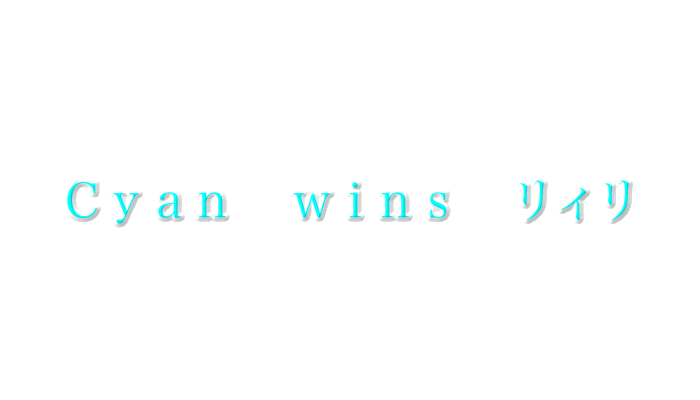
<style>
.page{position:relative;width:700px;height:400px;background:#ffffff}
.page>*{position:absolute;margin:0}
.t1{font:48px "HiraMinProN-W3";letter-spacing:0.12em;color:#00fcfc}
</style>
<div class="page">
<p class="t1" style="left:67px;top:180px;width:562px;height:44px">Ｃｙａｎ　ｗｉｎｓ　リィリ</p>
</div>
